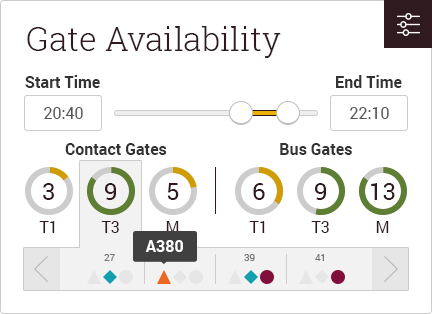
<style>
.page{position:relative;width:432px;height:314px;background:#ffffff}
.page>*{position:absolute;margin:0}
.t1{font:33px "RobotoSlab-Light";color:#2f1b1f}
.t2{font:16px "Roboto-Bold";color:#333333}
.t3{font:16px "Roboto-Regular";color:#555555}
.t4{font:24px "Roboto-Regular";color:#2f1b1f}
.t5{font:16px "Roboto-Regular";color:#2f1b1f}
.t6{font:16px "Roboto-Bold";color:#ffffff}
.t7{font:10px "Roboto-Regular";color:#767676}
</style>
<div class="page">
<p class="t1" style="left:27px;top:26px;width:254px;height:32px">Gate Availability</p>
<p class="t2" style="left:25px;top:75px;width:75px;height:13px">Start Time</p>
<p class="t2" style="left:336px;top:75px;width:66px;height:13px">End Time</p>
<p class="t3" style="left:44px;top:107px;width:39px;height:12px">20:40</p>
<p class="t3" style="left:350px;top:107px;width:39px;height:12px">22:10</p>
<p class="t2" style="left:65px;top:143px;width:102px;height:12px">Contact Gates</p>
<p class="t2" style="left:280px;top:143px;width:72px;height:12px">Bus Gates</p>
<p class="t4" style="left:43px;top:183px;width:11px;height:17px">3</p>
<p class="t4" style="left:105px;top:183px;width:11px;height:17px">9</p>
<p class="t4" style="left:167px;top:183px;width:12px;height:17px">5</p>
<p class="t4" style="left:253px;top:183px;width:12px;height:17px">6</p>
<p class="t4" style="left:315px;top:183px;width:11px;height:17px">9</p>
<p class="t4" style="left:371px;top:183px;width:24px;height:17px">13</p>
<p class="t5" style="left:39px;top:221px;width:16px;height:12px">T1</p>
<p class="t5" style="left:101px;top:221px;width:18px;height:12px">T3</p>
<p class="t5" style="left:166px;top:221px;width:13px;height:12px">M</p>
<p class="t5" style="left:249px;top:221px;width:16px;height:12px">T1</p>
<p class="t5" style="left:311px;top:221px;width:18px;height:12px">T3</p>
<p class="t5" style="left:376px;top:221px;width:13px;height:12px">M</p>
<p class="t6" style="left:145px;top:240px;width:38px;height:12px">A380</p>
<p class="t7" style="left:104px;top:254px;width:11px;height:7px">27</p>
<p class="t7" style="left:244px;top:254px;width:11px;height:7px">39</p>
<p class="t7" style="left:315px;top:254px;width:9px;height:7px">41</p>
</div>
